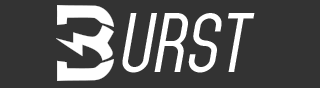
<style>
.page{position:relative;width:320px;height:88px;background:#333333}
.page>*{position:absolute;margin:0}
.t1{font:72px "Mohave-SemiBoldItalic";color:#ffffff}
</style>
<div class="page">
<p class="t1" style="left:122px;top:13px;width:133px;height:60px">URST</p>
</div>
